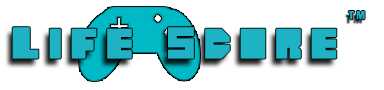
<style>
.page{position:relative;width:384px;height:90px;background:#ffffff}
.page>*{position:absolute;margin:0}
.t1{font:12px "FranklinGothic-DemiCond";letter-spacing:0.2em;color:#1db2c4}
.t2{font:43px "heavyLOUDedge";letter-spacing:0.2em;color:#1db2c4}
.t3{font:45px "heavyLOUDedge";letter-spacing:0.2em;color:#1db2c4}
</style>
<div class="page">
<p class="t1" style="left:348px;top:11px;width:17px;height:9px">TM</p>
<p class="t2" style="left:12px;top:27px;width:325px;height:32px"><span class="t3">L</span>IFE <span class="t3">S</span>CORE</p>
</div>
